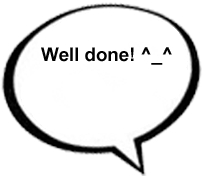
<style>
.page{position:relative;width:203px;height:176px;background:#ffffff}
.page>*{position:absolute;margin:0}
.t1{font:18.6px "Arial-BoldMT";color:#010101}
</style>
<div class="page">
<p class="t1" style="left:41px;top:47px;width:131px;height:18px">Well done! ^_^</p>
</div>
